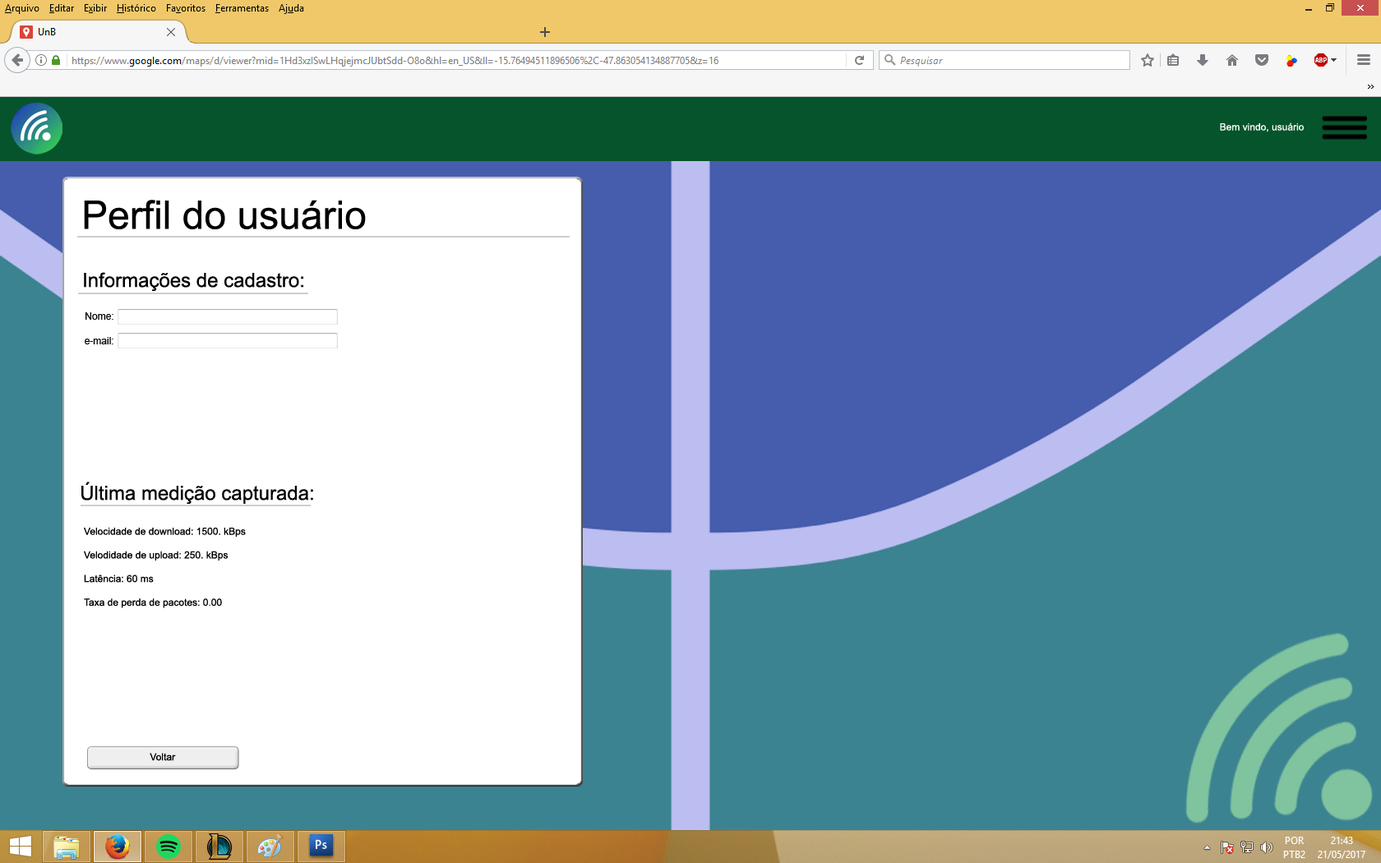
<style>
.page{position:relative;width:1381px;height:863px;background:#3c8391}
.page>*{position:absolute;margin:0}
.t1{font:9.9px "ArialMT";color:#ffffff}
.t2{font:39.5px "ArialMT";color:#000000}
.t3{font:19.7px "ArialMT";color:#000000}
.t4{font:9.9px "ArialMT";color:#000000}
</style>
<div class="page">
<p class="t1" style="left:1220px;top:123px;width:84px;height:9px">Bem vindo, usuário</p>
<p class="t2" style="left:84px;top:200px;width:282px;height:29px">Perfil do usuário</p>
<p class="t3" style="left:84px;top:272px;width:219px;height:19px">Informações de cadastro:</p>
<p class="t3" style="left:81px;top:482px;width:232px;height:22px">Última medição capturada:</p>
<p class="t4" style="left:84px;top:527px;width:162px;height:81px">Velocidade de download: 1500. kBps<br><br>Velodidade de upload: 250. kBps<br><br>Latência: 60 ms<br><br>Taxa de perda de pacotes: 0.00</p>
<p class="t4" style="left:150px;top:753px;width:26px;height:8px">Voltar</p>
</div>
